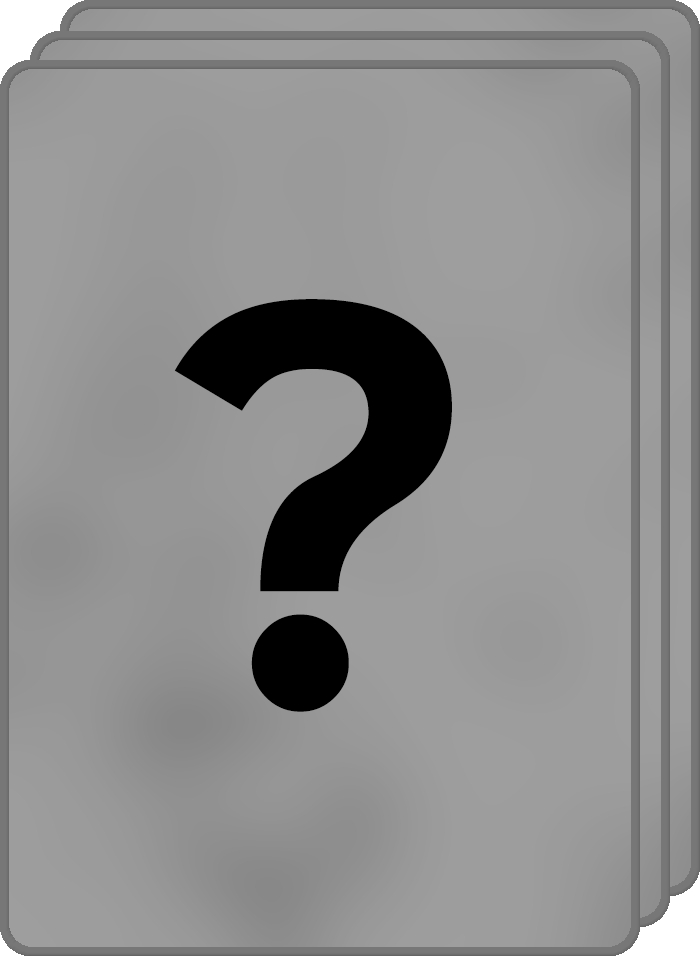
<style>
.page{position:relative;width:700px;height:956px}
.page>*{position:absolute;margin:0}
.t1{font:589.4px "Cadman-Bold";letter-spacing:0.003em;color:#000000}
</style>
<div class="page">
<p class="t1" style="left:174px;top:299px;width:278px;height:413px">?</p>
</div>
